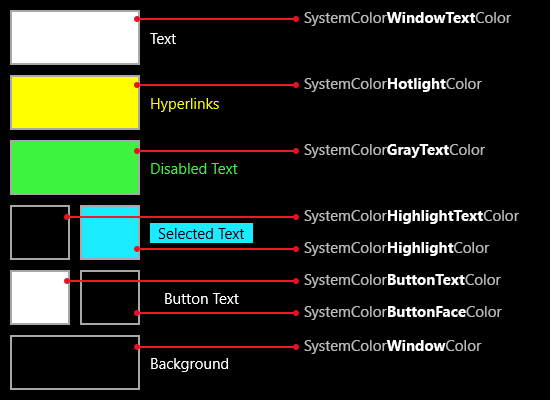
<style>
.page{position:relative;width:550px;height:400px;background:#000000}
.page>*{position:absolute;margin:0}
.t1{font:15px "SegoeUI";color:#bbbbbb}
.t2{font:15px "SegoeUI-Bold";color:#ffffff}
</style>
<div class="page">
<p class="t1" style="left:304px;top:12px;width:207px;height:14px">SystemColor<span class="t2">WindowText</span>Color</p>
<p class="t1" style="left:304px;top:78px;width:178px;height:14px">SystemColor<span class="t2">Hotlight</span>Color</p>
<p class="t1" style="left:304px;top:144px;width:181px;height:14px">SystemColor<span class="t2">GrayText</span>Color</p>
<p class="t2" style="left:304px;top:210px;width:215px;height:14px"><span class="t1">SystemColor</span>HighlightText<span class="t1">Color</span></p>
<p class="t1" style="left:304px;top:242px;width:186px;height:14px">SystemColor<span class="t2">Highlight</span>Color</p>
<p class="t1" style="left:304px;top:274px;width:197px;height:14px">SystemColor<span class="t2">ButtonText</span>Color</p>
<p class="t1" style="left:304px;top:306px;width:198px;height:14px">SystemColor<span class="t2">ButtonFace</span>Color</p>
<p class="t1" style="left:304px;top:340px;width:178px;height:14px">SystemColor<span class="t2">Window</span>Color</p>
</div>
